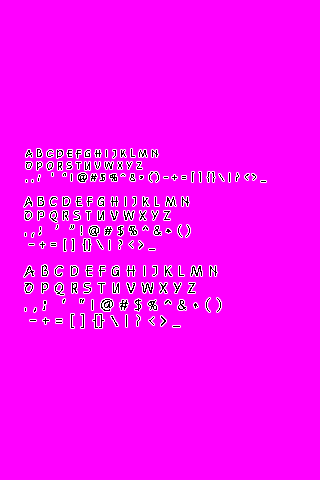
<style>
.page{position:relative;width:320px;height:480px;background:#ff00ff}
.page>*{position:absolute;margin:0}
.t1{font:10px "H2porM";color:#000000}
.t2{font:12px "H2porM";color:#000000}
.t3{font:14px "H2porM";color:#000000}
</style>
<div class="page">
<p class="t1" style="left:26px;top:149px;width:240px;height:33px">A B C D E F G H I J K L M N <br>O P Q R S T U V W X Y Z <br>. , ; ‘ “ ! @ # $ % ^ &amp; * ( ) - + = [ ] {} \ | ? &lt; &gt; _</p>
<p class="t2" style="left:24px;top:197px;width:166px;height:54px">A B C D E F G H I J K L M N <br>O P Q R S T U V W X Y Z <br>. , ; ‘ “ ! @ # $ % ^ &amp; * ( )<br> - + = [ ] {} \ | ? &lt; &gt; _</p>
<p class="t3" style="left:24px;top:265px;width:197px;height:63px">A B C D E F G H I J K L M N <br>O P Q R S T U V W X Y Z <br>. , ; ‘ “ ! @ # $ % ^ &amp; * ( )<br> - + = [ ] {} \ | ? &lt; &gt; _</p>
</div>
